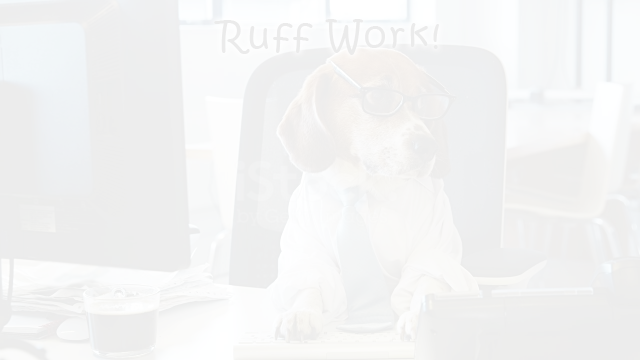
<style>
.page{position:relative;width:640px;height:360px}
.page>*{position:absolute;margin:0}
.t1{font:36px "KristenITC-Regular";letter-spacing:0.075em;color:#ebebeb}
</style>
<div class="page">
<p class="t1" style="left:214px;top:19px;width:225px;height:36px">Ruff Work!</p>
</div>
